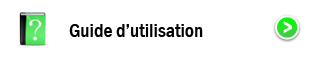
<style>
.page{position:relative;width:320px;height:57px;background:#ffffff}
.page>*{position:absolute;margin:0}
.t1{font:20px "FranklinGothic-MediumCond";color:#000000}
</style>
<div class="page">
<p class="t1" style="left:69px;top:24px;width:134px;height:13px">Guide d’utilisation</p>
</div>
